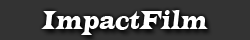
<style>
.page{position:relative;width:250px;height:40px;background:#333333}
.page>*{position:absolute;margin:0}
.t1{font:27.2px "LatinWide";letter-spacing:0.01em;color:#ffffff;font-style:italic;scale:0.59 1}
</style>
<div class="page">
<p class="t1" style="left:41px;top:10px;width:167px;height:25px">ImpactFilm</p>
</div>
